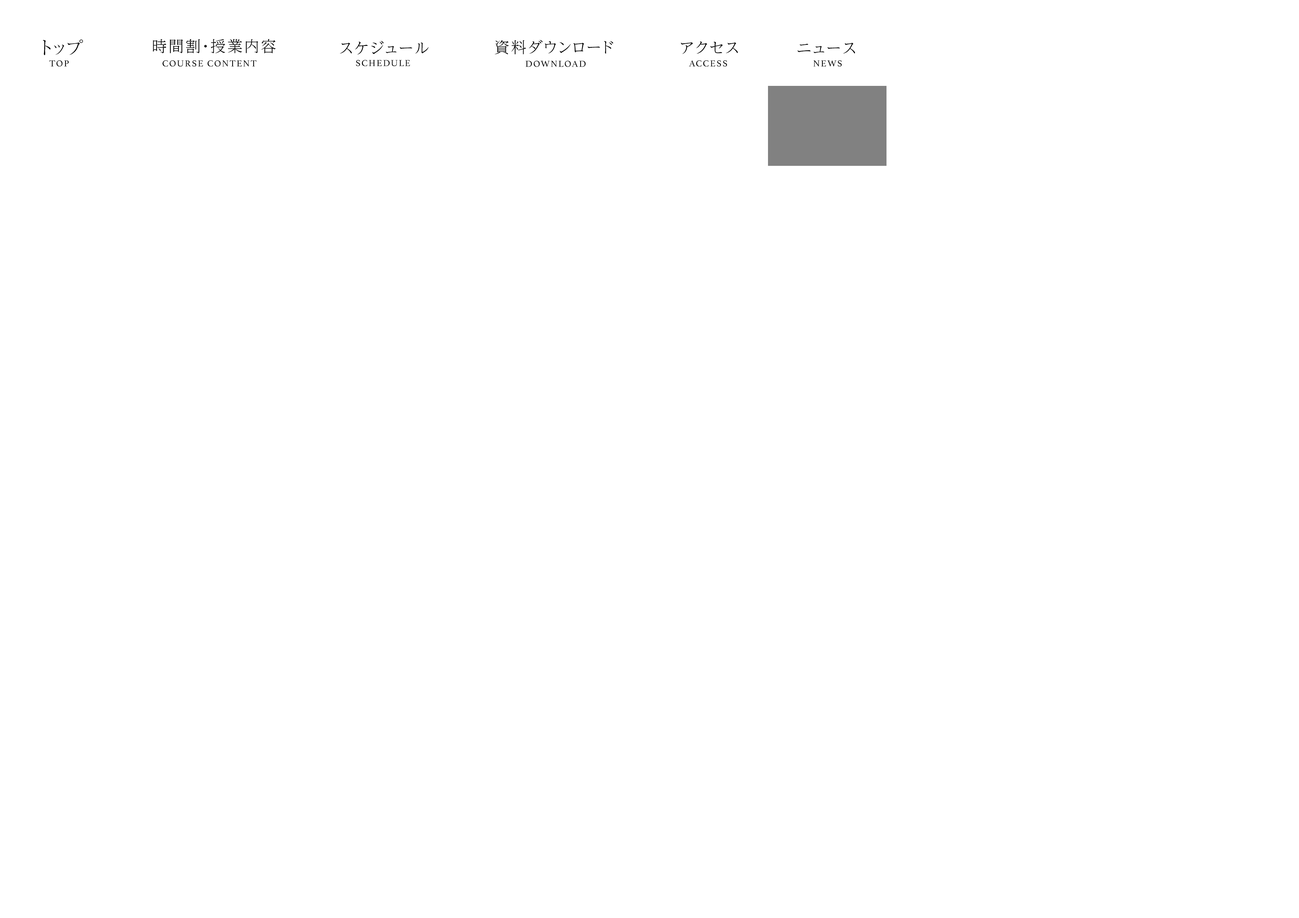
<style>
.page{position:relative;width:1299px;height:918px;background:#ffffff}
.page>*{position:absolute;margin:0}
.t1{font:18.5px "RyuminPr6N-Light";letter-spacing:0.1em;color:#000000;text-transform:uppercase}
.t2{font:15.4px "UDReiminPr6N-Light";letter-spacing:0.1em;color:#000000;text-transform:uppercase}
.t3{font:9.3px "Athelas-Regular";letter-spacing:0.1em;color:#000000;text-transform:uppercase}
</style>
<div class="page">
<p class="t1" style="left:43px;top:39px;width:40px;height:16px">トップ</p>
<p class="t2" style="left:153px;top:39px;width:123px;height:14px">時間割・授業内容</p>
<p class="t2" style="left:340px;top:41px;width:89px;height:14px">スケジュール</p>
<p class="t2" style="left:495px;top:40px;width:118px;height:14px">資料ダウンロード</p>
<p class="t2" style="left:681px;top:41px;width:57px;height:13px">アクセス</p>
<p class="t2" style="left:797px;top:43px;width:58px;height:11px">ニュース</p>
<p class="t3" style="left:49px;top:60px;width:20px;height:7px">TOP</p>
<p class="t3" style="left:163px;top:60px;width:94px;height:7px">Course content</p>
<p class="t3" style="left:356px;top:60px;width:54px;height:6px">schedule</p>
<p class="t3" style="left:525px;top:61px;width:61px;height:6px">download</p>
<p class="t3" style="left:689px;top:60px;width:38px;height:7px">access</p>
<p class="t3" style="left:813px;top:60px;width:29px;height:7px">News</p>
</div>
